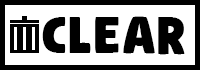
<style>
.page{position:relative;width:200px;height:70px;background:#ffffff}
.page>*{position:absolute;margin:0}
.t1{font:58.3px "SuperCorn";letter-spacing:0.04em;color:#000000}
</style>
<div class="page">
<p class="t1" style="left:42px;top:16px;width:143px;height:39px">clear</p>
</div>
